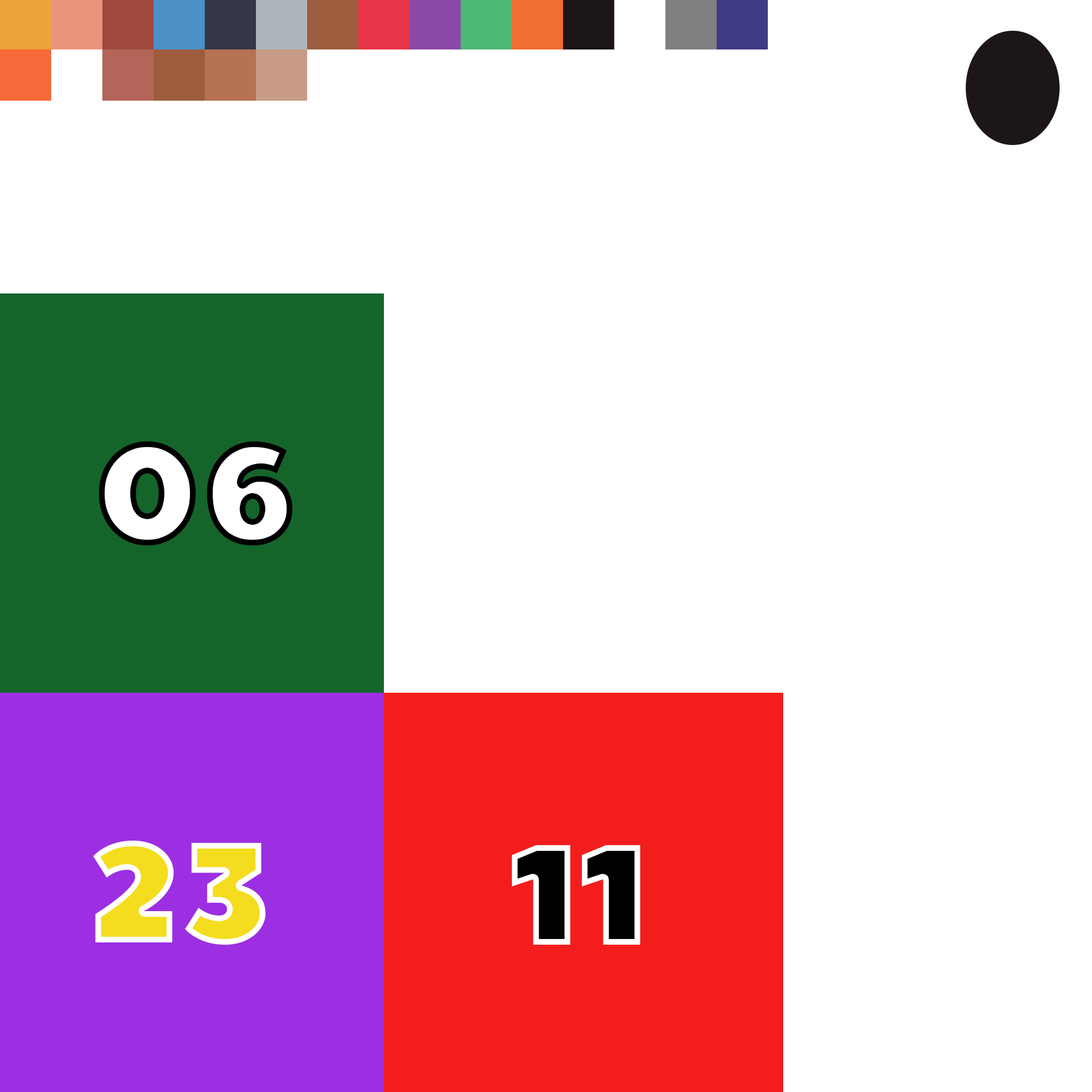
<style>
.page{position:relative;width:1092px;height:1092px;background:#ffffff}
.page>*{position:absolute;margin:0}
.t1{font:142.2px "PeaceSans";color:#ffffff}
.t2{font:142.2px "PeaceSans";color:#000000}
</style>
<div class="page">
<p class="t1" style="left:99px;top:441px;width:193px;height:104px">06</p>
<p class="t2" style="left:512px;top:845px;width:128px;height:100px">11</p>
</div>
